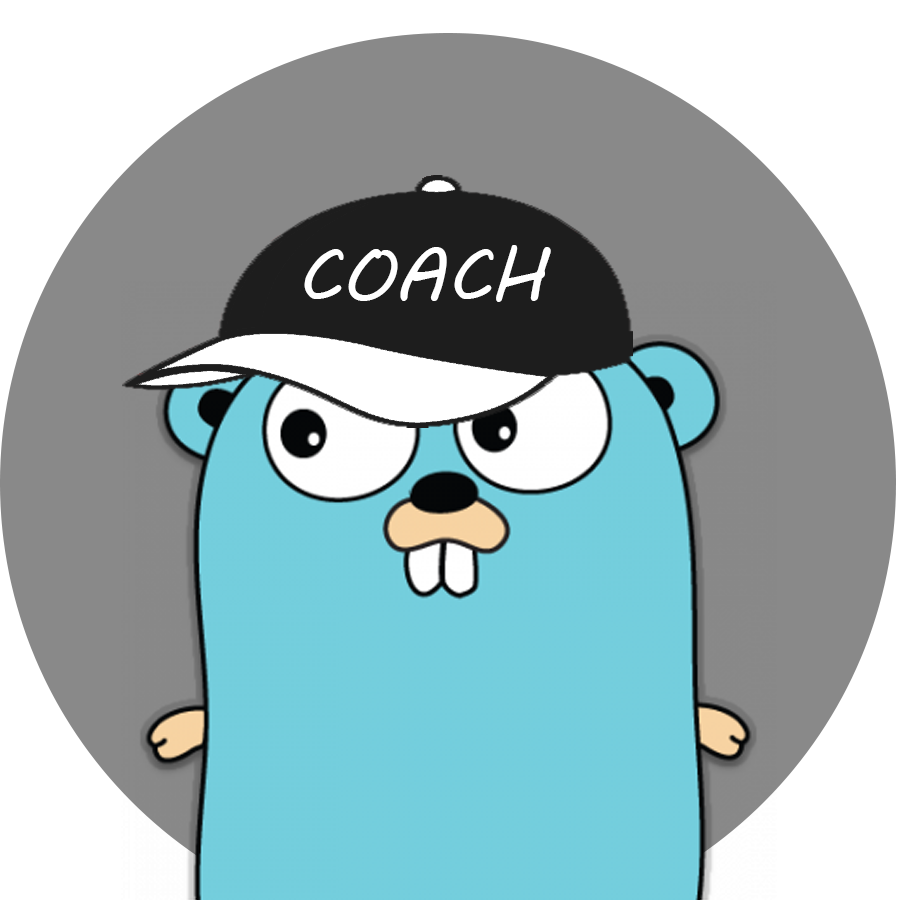
<style>
.page{position:relative;width:900px;height:900px;background:#898989}
.page>*{position:absolute;margin:0}
.t1{font:75px "MVBoli";color:#ffffff}
</style>
<div class="page">
<p class="t1" style="left:304px;top:245px;width:247px;height:57px">COACH</p>
</div>
